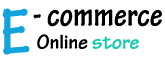
<style>
.page{position:relative;width:165px;height:59px;background:#ffffff}
.page>*{position:absolute;margin:0}
.t1{font:69.4px "TektonPro-BoldCond";color:#12a4dd}
.t2{font:34.7px "TektonPro-BoldCond";color:#000000}
.t3{font:20.8px "TektonPro-Bold";color:#000000}
.t4{font:20.8px "TektonPro-Bold";color:#19caaf}
</style>
<div class="page">
<p class="t1" style="left:2px;top:8px;width:28px;height:47px">E</p>
<p class="t2" style="left:33px;top:9px;width:129px;height:18px">- commerce</p>
<p class="t3" style="left:37px;top:34px;width:102px;height:15px">Online <span class="t4">store</span></p>
</div>
